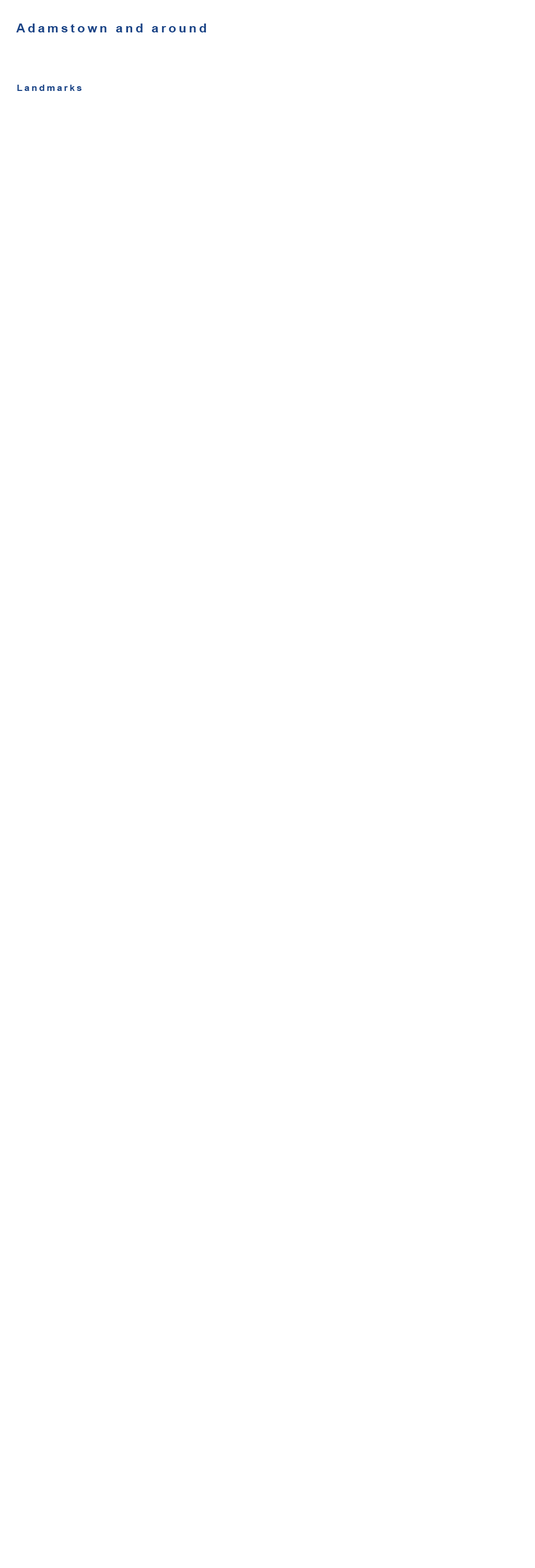
<style>
.page{position:relative;width:535px;height:1568px;background:#ffffff}
.page>*{position:absolute;margin:0}
.t1{font:12px "Arial-BoldMT";letter-spacing:0.2em;color:#1b4486;scale:1.04 1}
.t2{font:9px "Arial-BoldMT";letter-spacing:0.2em;color:#1b4486;scale:1.04 1}
</style>
<div class="page">
<p class="t1" style="left:16px;top:24px;width:190px;height:8px">Adamstown and around</p>
<p class="t2" style="left:17px;top:85px;width:65px;height:6px">Landmarks</p>
</div>
